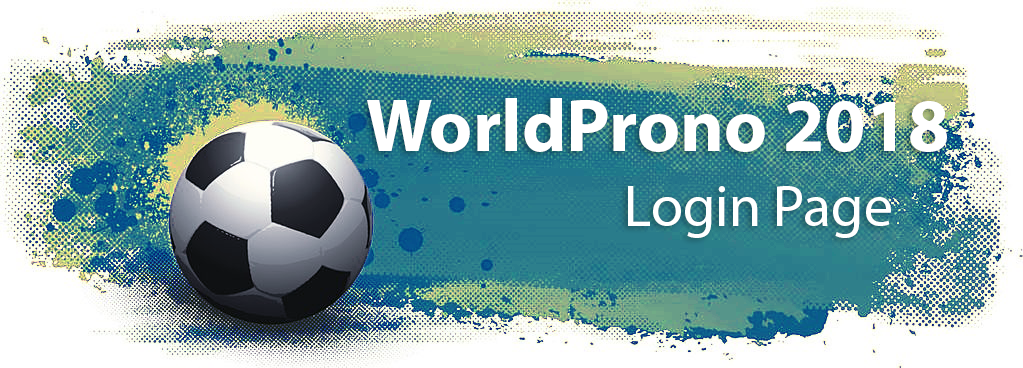
<style>
.page{position:relative;width:1023px;height:368px}
.page>*{position:absolute;margin:0}
.t1{font:75px "MyriadPro-Bold";color:#ffffff}
.t2{font:58.3px "MyriadPro-Regular";color:#ffffff}
</style>
<div class="page">
<p class="t1" style="left:367px;top:98px;width:580px;height:54px">WorldProno 2018</p>
<p class="t2" style="left:628px;top:186px;width:263px;height:52px">Login Page</p>
</div>
